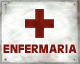
<style>
.page{position:relative;width:80px;height:64px}
.page>*{position:absolute;margin:0}
.t1{font:12px "CartesDisplaySSK";letter-spacing:0.02em;color:#7d160e;scale:0.96 1}
</style>
<div class="page">
<p class="t1" style="left:3px;top:44px;width:74px;height:9px">ENFERMARIA</p>
</div>
